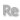
<style>
.page{position:relative;width:20px;height:20px;background:#ffffff}
.page>*{position:absolute;margin:0}
.t1{font:14px "Tahoma";color:#b3b3b3}
</style>
<div class="page">
<p class="t1" style="left:3px;top:4px;width:15px;height:12px">Re</p>
</div>
